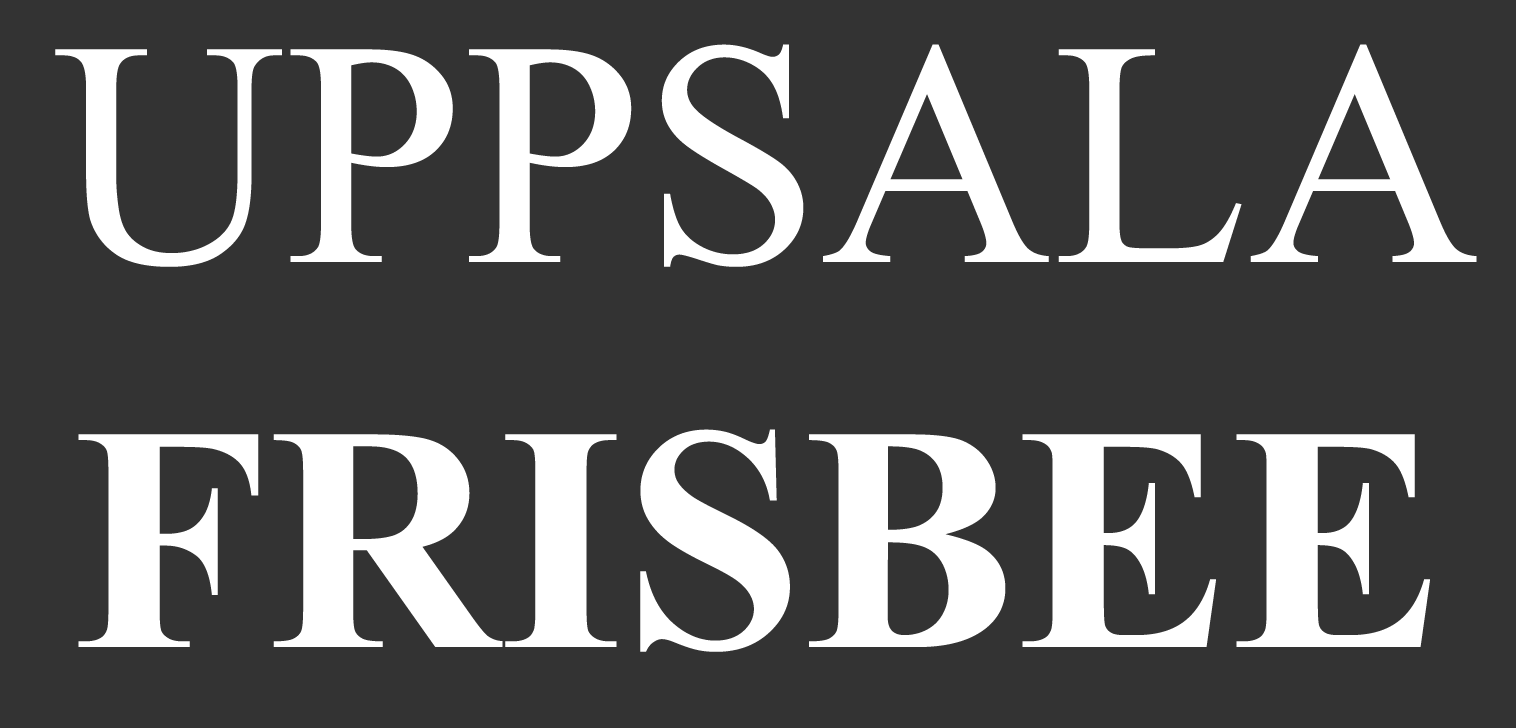
<style>
.page{position:relative;width:1516px;height:728px;background:#333333}
.page>*{position:absolute;margin:0}
.t1{font:320.8px/487.5px "TimesNewRomanPSMT";color:#ffffff}
.t2{font:320.8px "TimesNewRomanPS-BoldMT";color:#ffffff}
</style>
<div class="page">
<p class="t1" style="left:55px;top:44px;width:1422px;height:608px;text-align:center">UPPSALA<br><span class="t2">FRISBEE</span></p>
</div>
